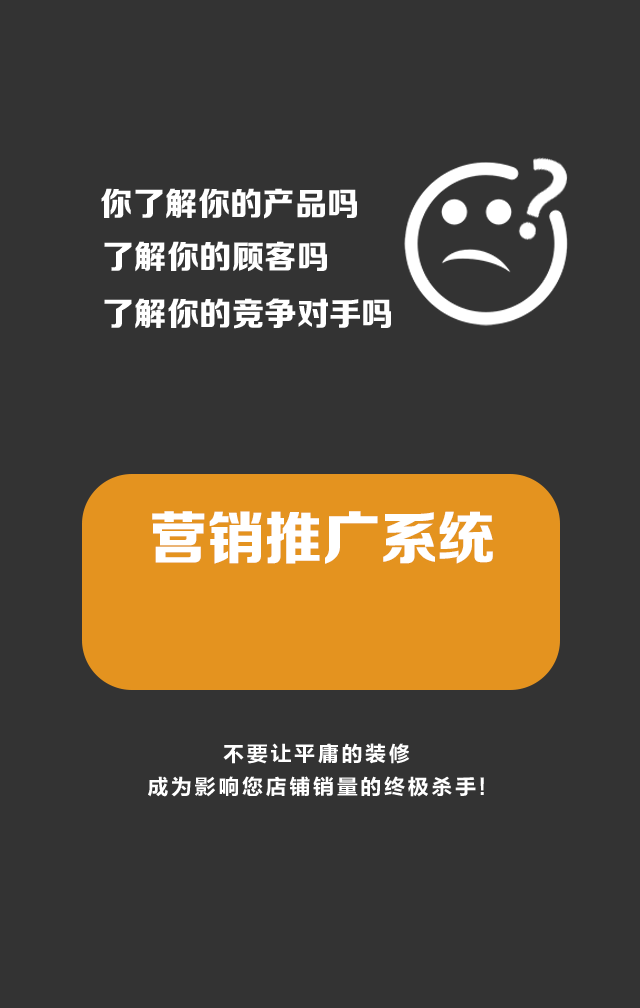
<style>
.page{position:relative;width:640px;height:1008px;background:#333333}
.page>*{position:absolute;margin:0}
.t1{font:32.7px "FZZDHJW--GB1-0";letter-spacing:0.005em;color:#ffffff;text-transform:uppercase}
.t2{font:57.7px "FZZDHJW--GB1-0";letter-spacing:-0.01em;color:#ffffff;text-transform:uppercase}
.t3{font:21.5px/32.2px "FZLTCHK--GBK1-0";letter-spacing:0.1em;color:#ffffff;text-transform:uppercase}
</style>
<div class="page">
<p class="t1" style="left:101px;top:188px;width:256px;height:31px">你了解你的产品吗</p>
<p class="t1" style="left:104px;top:241px;width:223px;height:31px">了解你的顾客吗</p>
<p class="t1" style="left:104px;top:298px;width:287px;height:31px">了解你的竞争对手吗</p>
<p class="t2" style="left:152px;top:511px;width:341px;height:53px">营销推广系统</p>
<p class="t3" style="left:148px;top:743px;width:336px;height:54px;text-align:center">不要让平庸的装修<br>成为影响您店铺销量的终极杀手!</p>
</div>
